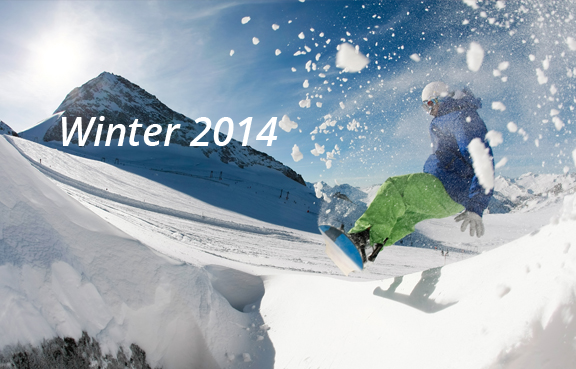
<style>
.page{position:relative;width:576px;height:369px}
.page>*{position:absolute;margin:0}
.t1{font:40px "OpenSans-SemiboldItalic";color:#ffffff}
</style>
<div class="page">
<p class="t1" style="left:62px;top:116px;width:216px;height:30px">Winter 2014</p>
</div>
